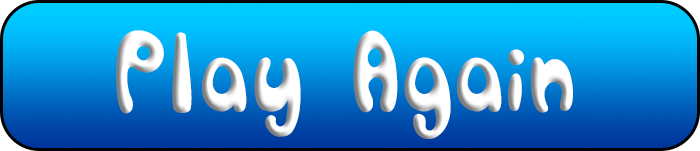
<style>
.page{position:relative;width:700px;height:151px}
.page>*{position:absolute;margin:0}
.t1{font:85px "SORRY_SORRY";letter-spacing:0.03em;color:#ffffff}
</style>
<div class="page">
<p class="t1" style="left:116px;top:30px;width:457px;height:109px">Play Again</p>
</div>
